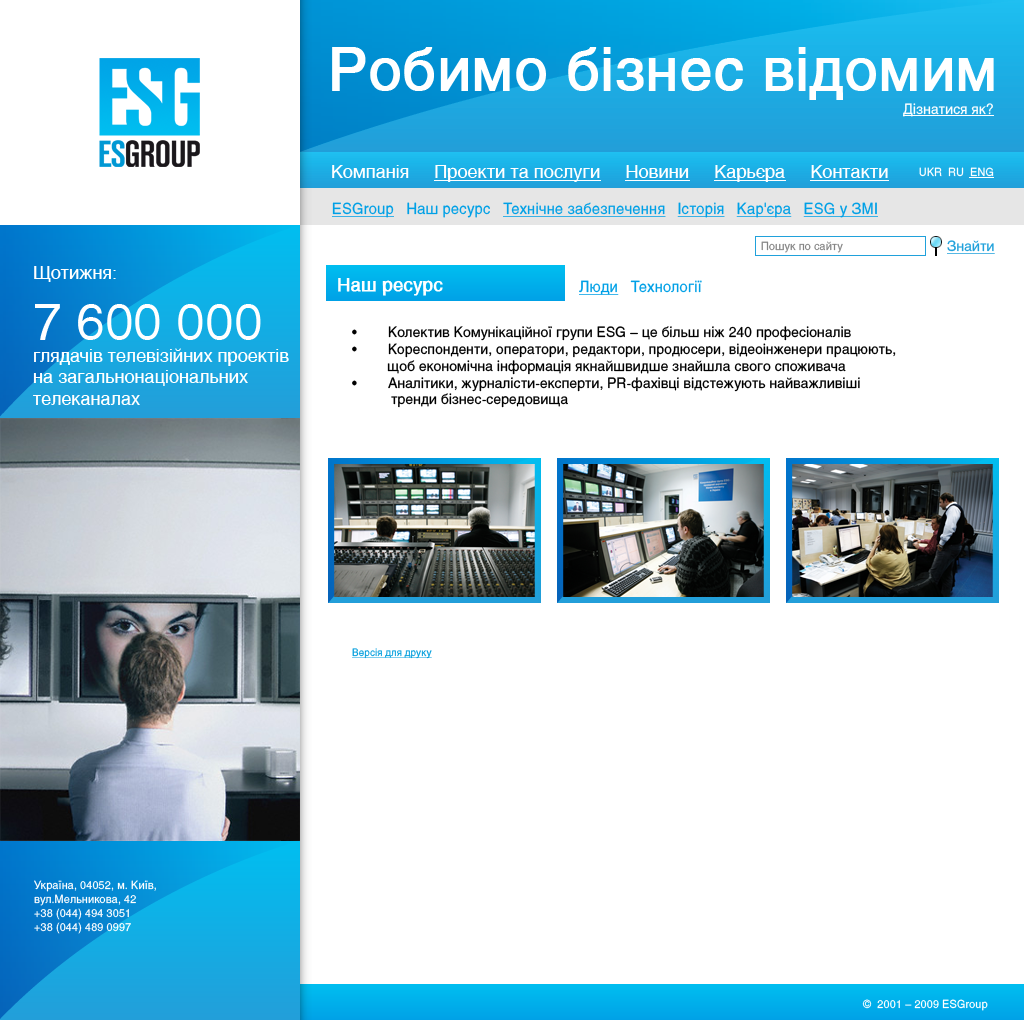
<style>
.page{position:relative;width:1024px;height:1020px;background:#ffffff}
.page>*{position:absolute;margin:0}
.t1{font:58px "Helios";color:#ffffff;font-weight:bold}
.t2{font:14px "Helios";color:#ffffff}
.t3{font:18px "Helios";color:#ffffff}
.t4{font:11px "Helios";color:#ffffff}
.t5{font:15px "Helios";color:#00a0e6;text-decoration:underline}
.t6{font:15px "Helios";color:#00a0e6}
.t7{font:11px "Helios";color:#858585}
.t8{font:14px "Helios";color:#20a1db;text-decoration:underline}
.t9{font:51px "Helios";color:#ffffff}
.t10{font:18px "Helios";color:#ffffff;font-weight:bold}
.t11{font:14px "Helios";color:#000000}
.t12{font:10px "Helios";color:#009ddc;text-decoration:underline}
.t13{font:11px/14px "Helios";color:#ffffff}
</style>
<div class="page">
<p class="t1" style="left:332px;top:47px;width:662px;height:53px">Робимо бізнес відомим</p>
<p class="t2" style="left:903px;top:103px;width:90px;height:14px">Дізнатися як?</p>
<p class="t3" style="left:332px;top:165px;width:556px;height:17px">Компанія     Проекти та послуги     Новини     Карьєра     Контакти</p>
<p class="t4" style="left:919px;top:167px;width:75px;height:10px">UKR  RU  ENG</p>
<p class="t5" style="left:332px;top:202px;width:546px;height:16px">ESGroup<span class="t6">   Наш ресурс   </span>Технічне забезпечення   Історія   Кар'єра   ESG у ЗМІ</p>
<p class="t7" style="left:761px;top:241px;width:82px;height:12px">Пошук по сайту</p>
<p class="t8" style="left:947px;top:240px;width:48px;height:14px">Знайти</p>
<p class="t3" style="left:33px;top:266px;width:256px;height:139px">Щотижня:<br><span class="t9">7 600 000 </span> глядачів телевізійних проектів на загальнонаціональних телеканалах</p>
<p class="t10" style="left:338px;top:278px;width:105px;height:18px">Наш ресурс</p>
<p class="t6" style="left:579px;top:280px;width:123px;height:15px"><span class="t5">Люди</span>   Технології</p>
<p class="t11" style="left:352px;top:326px;width:544px;height:82px;text-align:justify">• Колектив Комунікаційної групи ESG – це більш ніж 240 професіоналів <br>• Кореспонденти, оператори, редактори, продюсери, відеоінженери працюють,             щоб економічна інформація якнайшвидше знайшла свого споживача<br>• Аналітики, журналісти-експерти, PR-фахівці відстежують найважливіші             тренди бізнес-середовища</p>
<p class="t12" style="left:352px;top:648px;width:80px;height:11px">Версія для друку</p>
<p class="t13" style="left:34px;top:880px;width:122px;height:54px">Україна, 04052, м. Київ, <br>вул.Мельникова, 42<br>+38 (044) 494 3051<br>+38 (044) 489 0997</p>
<p class="t4" style="left:862px;top:999px;width:126px;height:12px">©  2001 – 2009 ESGroup</p>
</div>
